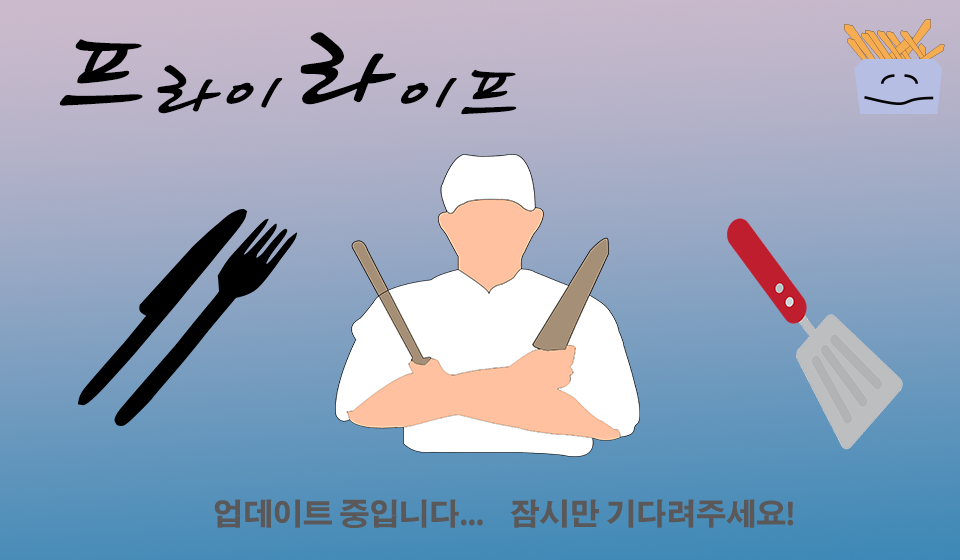
<style>
.page{position:relative;width:960px;height:560px}
.page>*{position:absolute;margin:0}
.t1{font:100px "HaanCjaB";color:#000000}
.t2{font:150px "HaanCjaB";color:#000000}
.t3{font:30px "AdobeGothicStd-Bold";color:#5a5858}
</style>
<div class="page">
<p class="t1" style="left:59px;top:32px;width:458px;height:83px"><span class="t2">프</span>라이  <span class="t2">라</span>이프</p>
<p class="t3" style="left:214px;top:499px;width:580px;height:29px">업데이트 중입니다...    잠시만 기다려주세요!</p>
</div>
